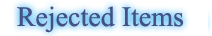
<style>
.page{position:relative;width:212px;height:36px;background:#ffffff}
.page>*{position:absolute;margin:0}
.t1{font:28px "TimesNewRomanPSMT";color:#445186}
.t2{font:27px "TimesNewRomanPSMT";color:#445186}
</style>
<div class="page">
<p class="t1" style="left:17px;top:6px;width:166px;height:27px"><span class="t2"> </span>Rejected Items</p>
</div>
